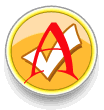
<style>
.page{position:relative;width:104px;height:110px;background:#ffffff}
.page>*{position:absolute;margin:0}
.t1{font:72px "STFangsong";color:#f80813;scale:0.79 1}
</style>
<div class="page">
<p class="t1" style="left:24px;top:22px;width:55px;height:62px;rotate:8deg">A</p>
</div>
